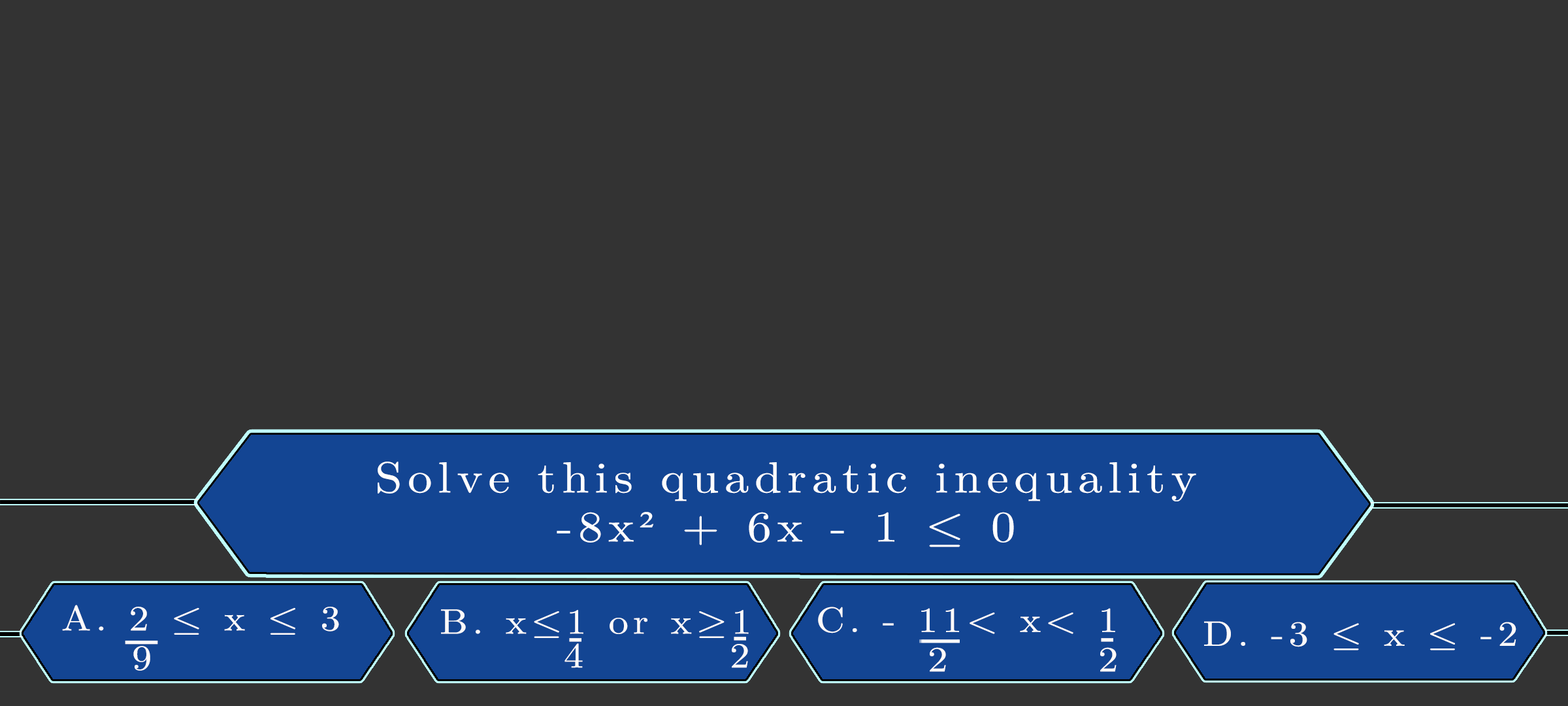
<style>
.page{position:relative;width:1568px;height:706px;background:#333333}
.page>*{position:absolute;margin:0}
.t1{font:43.6px/49px "LatinModernMath-Regular";letter-spacing:0.115em;color:#ffffff;scale:1.12 1}
.t2{font:43.6px/46.3px "TimesNewRomanPSMT";letter-spacing:0.115em;color:#ffffff;scale:1.12 1}
.t3{font:35.4px/39.3px "LatinModernMath-Regular";letter-spacing:0.115em;color:#fdfafa;text-transform:uppercase;scale:1.12 1}
.t4{font:35.4px/39.3px "LatinModernMath-Regular";letter-spacing:0.115em;color:#fdfafa;scale:1.12 1}
.t5{font:35.4px/33.9px "LatinModernMath-Regular";letter-spacing:0.115em;color:#fcfafa;scale:1.12 1}
.t6{font:35.4px/33.9px "LatinModernMath-Regular";letter-spacing:0.115em;color:#fcfafa;text-transform:uppercase;scale:1.12 1}
.t7{font:35.4px "LatinModernMath-Regular";letter-spacing:0.115em;color:#fcfafa;scale:1.12 1}
.t8{font:30px "GillSans-UltraBoldCondensed";letter-spacing:0.115em;color:#fdfafa;text-transform:uppercase;scale:3.02 1}
.t9{font:29.9px "GillSans-UltraBoldCondensed";letter-spacing:0.115em;color:#fcfafa;text-transform:uppercase;scale:1.12 1}
.t10{font:29.9px "GillSans-UltraBoldCondensed";letter-spacing:0.115em;color:#fdfafa;text-transform:uppercase;scale:1.12 1}
</style>
<div class="page">
<p class="t1" style="left:378px;top:461px;width:818px;height:86px;text-align:center">Solve this quadratic inequality<br>-8x<span class="t2">²</span> + 6x - 1 ≤ 0</p>
<p class="t3" style="left:62px;top:604px;width:277px;height:66px">a. 2 ≤ <span class="t4">x</span> ≤ 3<br>   9</p>
<p class="t5" style="left:441px;top:609px;width:308px;height:59px"><span class="t6">b. </span>x≤1 or x≥1<br>       4        2</p>
<p class="t3" style="left:818px;top:606px;width:299px;height:66px">c. - 11&lt; <span class="t4">x</span>&lt; 1<br>     2       2</p>
<p class="t7" style="left:1204px;top:621px;width:312px;height:29px">D. -3 ≤ x ≤ -2</p>
<p class="t8" style="left:125px;top:640px;width:33px;height:4px">_</p>
<p class="t9" style="left:569px;top:638px;width:12px;height:4px">_</p>
<p class="t9" style="left:734px;top:636px;width:12px;height:4px">_</p>
<p class="t10" style="left:1101px;top:638px;width:12px;height:4px">_</p>
</div>
